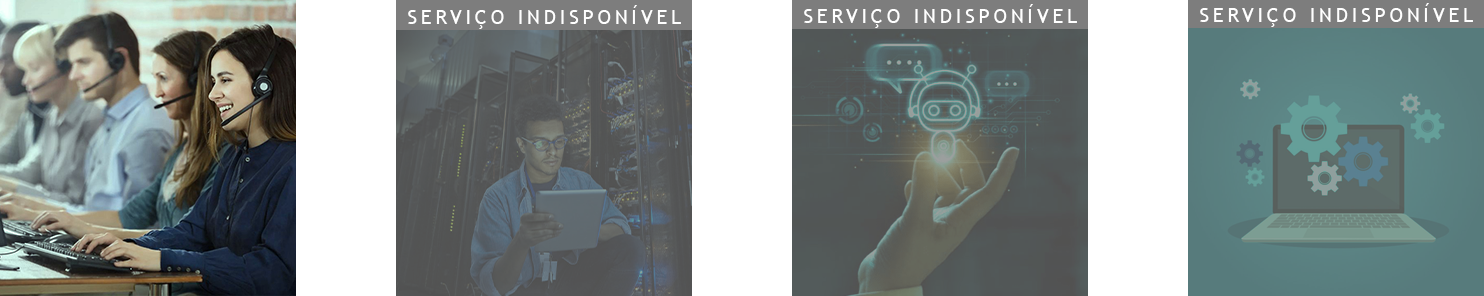
<style>
.page{position:relative;width:1484px;height:296px}
.page>*{position:absolute;margin:0}
.t1{font:20.3px "TrebuchetMS";letter-spacing:0.18em;color:#ffffff}
</style>
<div class="page">
<p class="t1" style="left:408px;top:5px;width:273px;height:24px">SERVIÇO INDISPONÍVEL</p>
<p class="t1" style="left:804px;top:4px;width:273px;height:24px">SERVIÇO INDISPONÍVEL</p>
<p class="t1" style="left:1200px;top:3px;width:273px;height:24px">SERVIÇO INDISPONÍVEL</p>
</div>
